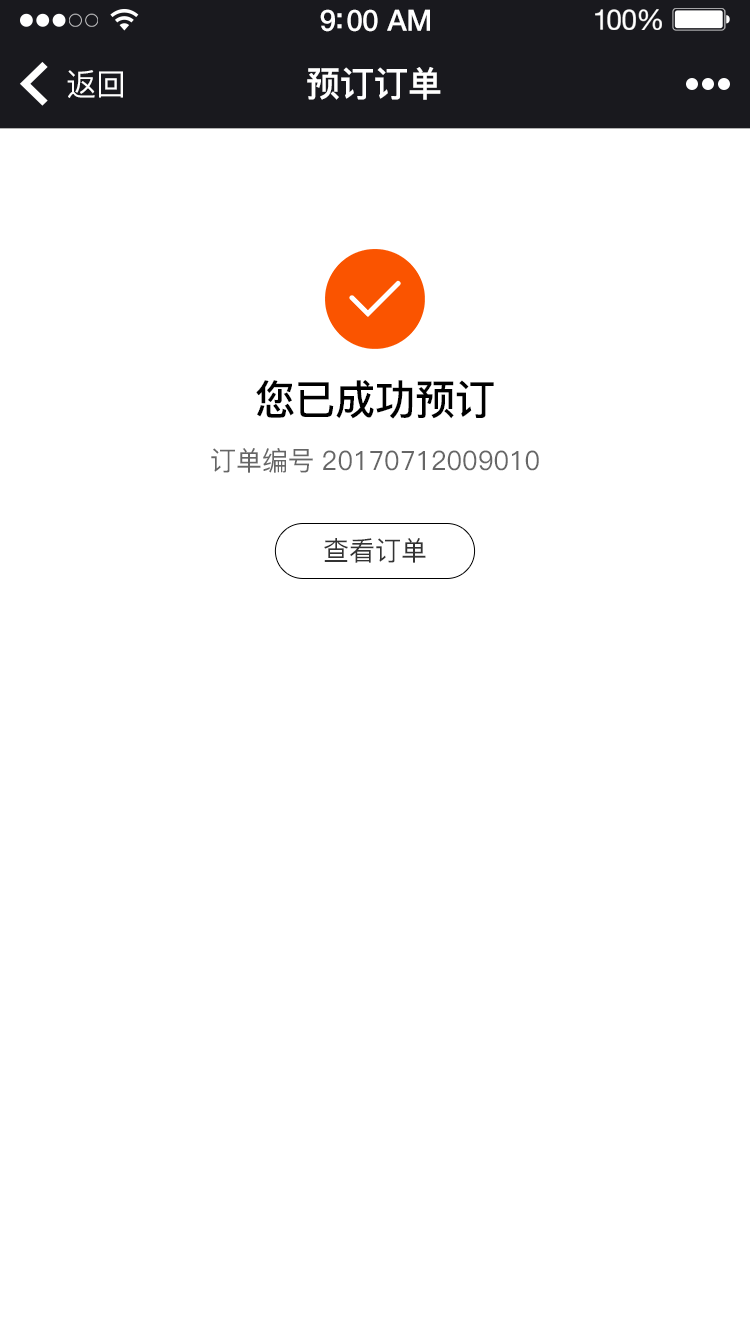
<style>
.page{position:relative;width:750px;height:1334px;background:#ffffff}
.page>*{position:absolute;margin:0}
.t1{font:29.5px "HelveticaNeue-Medium";letter-spacing:-0.02em;color:#ffffff}
.t2{font:28.3px "HelveticaNeue";letter-spacing:-0.02em;color:#ffffff}
.t3{font:30.9px "PingFang-SC-Medium";color:#ffffff;scale:0.97 1}
.t4{font:35px "PingFang-SC-Heavy";color:#ffffff;scale:0.97 1}
.t5{font:41.2px "PingFang-SC-Bold";color:#000000}
.t6{font:26.8px "PingFang-SC-Medium";color:#666666}
.t7{font:26.8px "PingFang-SC-Medium";color:#333333}
</style>
<div class="page">
<p class="t1" style="left:320px;top:9px;width:110px;height:23px">9:00 AM</p>
<p class="t2" style="left:595px;top:9px;width:67px;height:21px">100%</p>
<p class="t3" style="left:67px;top:70px;width:56px;height:28px">返回</p>
<p class="t4" style="left:307px;top:67px;width:134px;height:33px">预订订单</p>
<p class="t5" style="left:256px;top:380px;width:238px;height:39px">您已成功预订</p>
<p class="t6" style="left:211px;top:448px;width:102px;height:25px">订单编号</p>
<p class="t6" style="left:323px;top:450px;width:216px;height:21px">20170712009010</p>
<p class="t7" style="left:324px;top:538px;width:102px;height:25px">查看订单</p>
</div>
